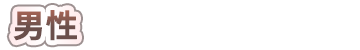
<style>
.page{position:relative;width:360px;height:50px;background:#ffffff}
.page>*{position:absolute;margin:0}
.t1{font:32px "SourceHanSansSC-Bold";color:#77544d;font-weight:bold}
</style>
<div class="page">
<p class="t1" style="left:13px;top:10px;width:64px;height:31px">男性</p>
</div>
